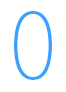
<style>
.page{position:relative;width:66px;height:92px;background:#ffffff}
.page>*{position:absolute;margin:0}
.t1{font:91.7px "SourceHanSans-ExtraLight";color:#37a3ff}
</style>
<div class="page">
<p class="t1" style="left:14px;top:11px;width:38px;height:69px">0</p>
</div>
